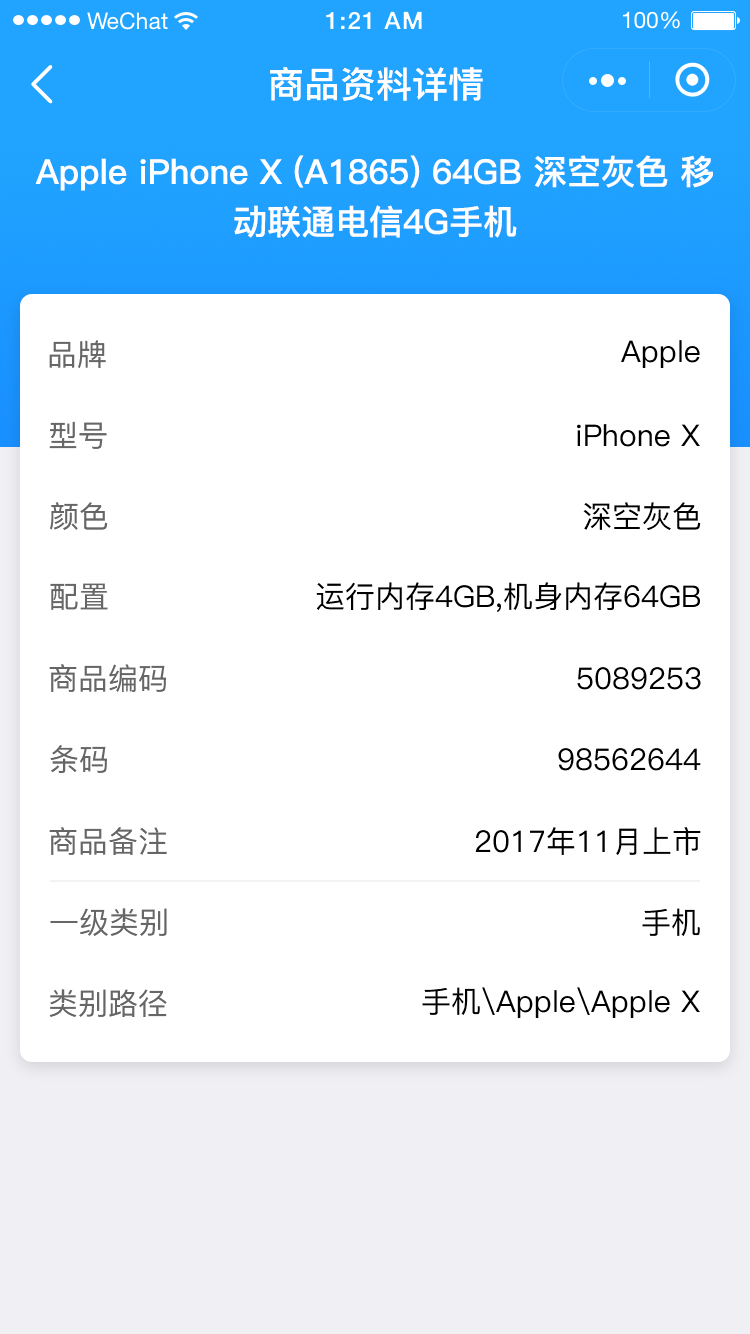
<style>
.page{position:relative;width:750px;height:1334px;background:#ffffff}
.page>*{position:absolute;margin:0}
.t1{font:36px "PingFang-SC-Bold";color:#ffffff}
.t2{font:34px/50px "PingFang-SC-Bold";color:#ffffff}
.t3{font:30px "PingFang-SC-Medium";color:#666666}
.t4{font:30px "PingFang-SC-Medium";color:#000000}
</style>
<div class="page">
<p class="t1" style="left:270px;top:67px;width:213px;height:34px">商品资料详情</p>
<p class="t2" style="left:35px;top:155px;width:678px;height:83px;text-align:center">Apple iPhone X (A1865) 64GB 深空灰色 移动联通电信4G手机</p>
<p class="t3" style="left:49px;top:340px;width:57px;height:28px">品牌</p>
<p class="t4" style="left:621px;top:340px;width:79px;height:28px">Apple</p>
<p class="t3" style="left:49px;top:421px;width:58px;height:28px">型号</p>
<p class="t4" style="left:577px;top:424px;width:123px;height:23px">iPhone X</p>
<p class="t3" style="left:50px;top:502px;width:58px;height:28px">颜色</p>
<p class="t4" style="left:583px;top:502px;width:118px;height:28px">深空灰色</p>
<p class="t4" style="left:316px;top:582px;width:384px;height:30px">运行内存4GB,机身内存64GB</p>
<p class="t3" style="left:50px;top:583px;width:58px;height:27px">配置</p>
<p class="t3" style="left:49px;top:664px;width:117px;height:28px">商品编码</p>
<p class="t4" style="left:577px;top:667px;width:124px;height:23px">5089253</p>
<p class="t3" style="left:50px;top:745px;width:57px;height:28px">条码</p>
<p class="t4" style="left:558px;top:748px;width:143px;height:23px">98562644</p>
<p class="t3" style="left:49px;top:827px;width:118px;height:28px">商品备注</p>
<p class="t4" style="left:475px;top:827px;width:226px;height:28px">2017年11月上市</p>
<p class="t3" style="left:50px;top:908px;width:117px;height:28px">一级类别</p>
<p class="t4" style="left:642px;top:908px;width:58px;height:28px">手机</p>
<p class="t3" style="left:49px;top:989px;width:118px;height:28px">类别路径</p>
<p class="t4" style="left:422px;top:987px;width:278px;height:31px">手机\Apple\Apple X</p>
</div>
